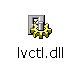
<style>
.page{position:relative;width:80px;height:80px;background:#ffffff}
.page>*{position:absolute;margin:0}
.t1{font:14px "MSReferenceSansSerif";color:#000000}
</style>
<div class="page">
<p class="t1" style="left:18px;top:47px;width:45px;height:11px">lvctl.dll</p>
</div>
